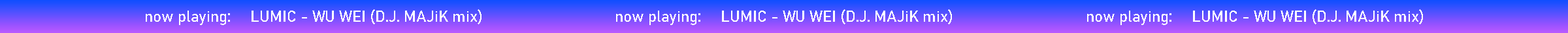
<style>
.page{position:relative;width:1568px;height:33px}
.page>*{position:absolute;margin:0}
.t1{font:15.7px "Bahnschrift";color:#ffffff}
</style>
<div class="page">
<p class="t1" style="left:146px;top:9px;width:336px;height:16px">now playing:     LUMIC - WU WEI (D.J. MAJiK mix)</p>
<p class="t1" style="left:616px;top:9px;width:336px;height:16px">now playing:     LUMIC - WU WEI (D.J. MAJiK mix)</p>
<p class="t1" style="left:1087px;top:9px;width:336px;height:16px">now playing:     LUMIC - WU WEI (D.J. MAJiK mix)</p>
</div>
